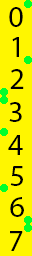
<style>
.page{position:relative;width:32px;height:256px;background:#fff600}
.page>*{position:absolute;margin:0}
.t1{font:30px "MyriadPro-Regular";color:#000000}
</style>
<div class="page">
<p class="t1" style="left:9px;top:7px;width:14px;height:20px">0</p>
<p class="t1" style="left:12px;top:37px;width:7px;height:20px">1</p>
<p class="t1" style="left:10px;top:69px;width:14px;height:20px">2</p>
<p class="t1" style="left:9px;top:102px;width:13px;height:20px">3</p>
<p class="t1" style="left:8px;top:135px;width:15px;height:20px">4</p>
<p class="t1" style="left:10px;top:166px;width:13px;height:20px">5</p>
<p class="t1" style="left:10px;top:197px;width:14px;height:20px">6</p>
<p class="t1" style="left:10px;top:231px;width:13px;height:20px">7</p>
</div>
